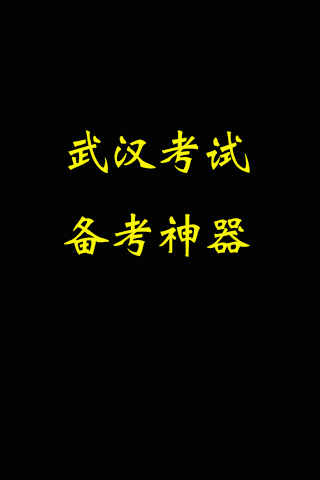
<style>
.page{position:relative;width:320px;height:480px;background:#030304}
.page>*{position:absolute;margin:0}
.t1{font:47px "Weibei-SC-Bold";color:#faf706}
</style>
<div class="page">
<p class="t1" style="left:64px;top:130px;width:186px;height:127px">武汉考试<br>备考神器</p>
</div>
